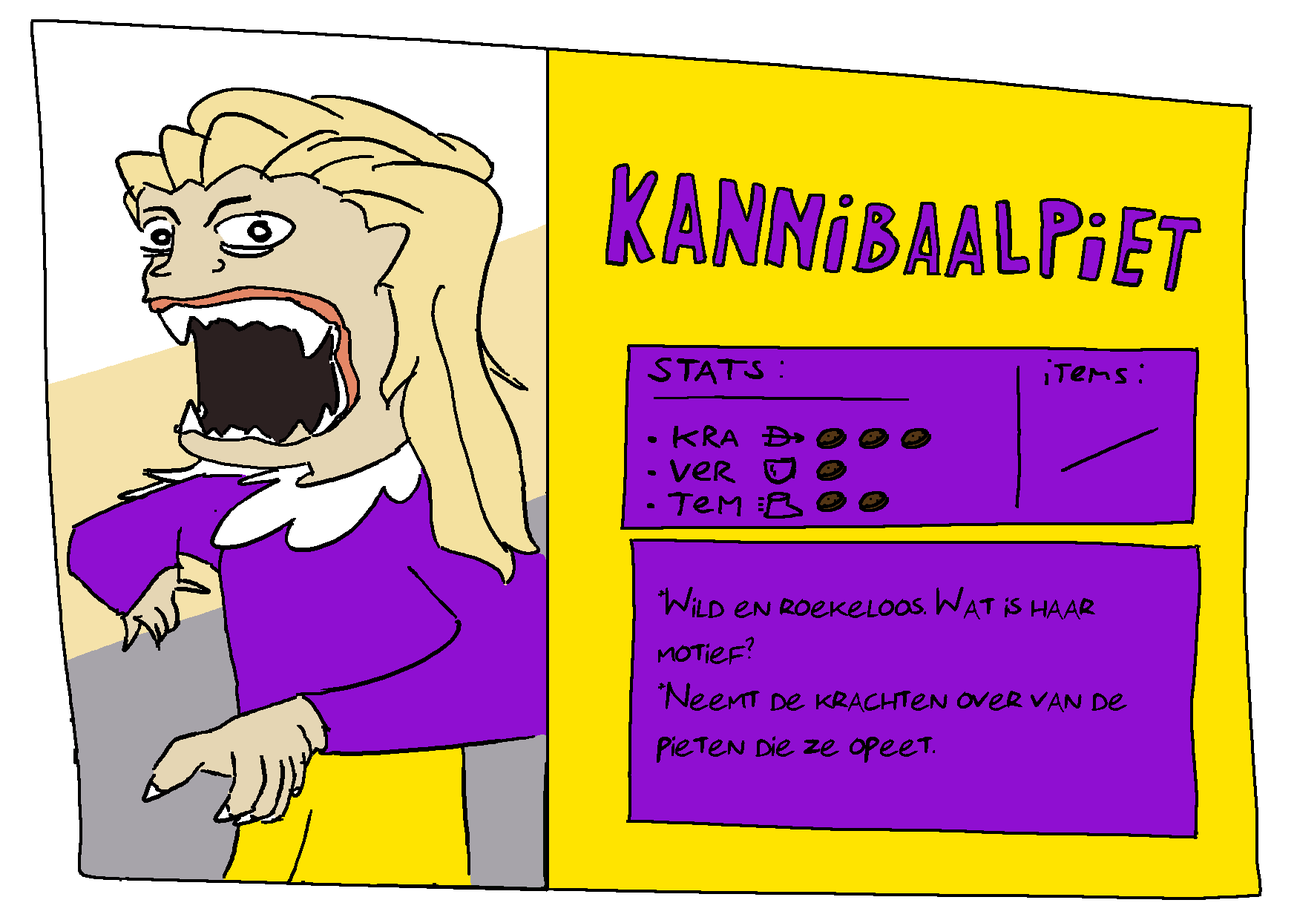
<style>
.page{position:relative;width:1297px;height:920px;background:#8f0fd1}
.page>*{position:absolute;margin:0}
.t1{font:40.2px/46.4px "Florisfont2-Regular";color:#000000}
</style>
<div class="page">
<p class="t1" style="left:656px;top:587px;width:471px;height:175px">*Wild en roekeloos. Wat is haar <br>motief? <br>*Neemt de krachten over van de<br>pieten die ze opeet.</p>
</div>
